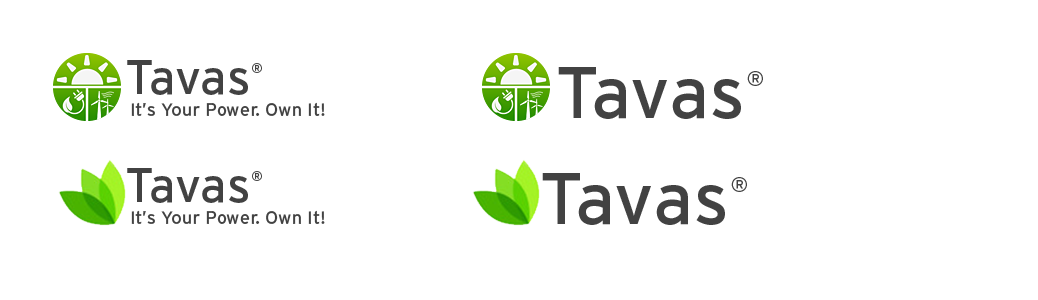
<style>
.page{position:relative;width:1038px;height:300px;background:#ffffff}
.page>*{position:absolute;margin:0}
.t1{font:18px "Interstate-Regular";letter-spacing:0.01em;color:#424242}
.t2{font:48px "Interstate-Regular";letter-spacing:0.01em;color:#424242}
.t3{font:24px "Interstate-Regular";letter-spacing:0.01em;color:#424242}
.t4{font:72.8px "Interstate-Regular";letter-spacing:0.01em;color:#424242}
.t5{font:36.4px "Interstate-Regular";letter-spacing:0.01em;color:#424242}
</style>
<div class="page">
<p class="t1" style="left:127px;top:60px;width:198px;height:56px"><span class="t2">Tavas</span><span class="t3">®<br></span> It’s Your Power. Own It!</p>
<p class="t4" style="left:558px;top:67px;width:205px;height:52px">Tavas<span class="t5">®</span></p>
<p class="t1" style="left:127px;top:168px;width:198px;height:56px"><span class="t2">Tavas</span><span class="t3">®<br></span> It’s Your Power. Own It!</p>
<p class="t4" style="left:542px;top:173px;width:205px;height:52px">Tavas<span class="t5">®</span></p>
</div>
